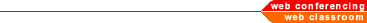
<style>
.page{position:relative;width:367px;height:23px;background:#ffffff}
.page>*{position:absolute;margin:0}
.t1{font:9px "Arial-BoldMT";letter-spacing:0.1em;color:#ffffff;font-weight:bold}
</style>
<div class="page">
<p class="t1" style="left:270px;top:2px;width:95px;height:9px">web conferencing</p>
<p class="t1" style="left:284px;top:13px;width:79px;height:8px">web classroom</p>
</div>
